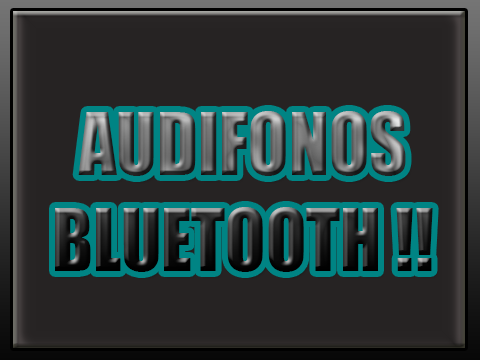
<style>
.page{position:relative;width:480px;height:360px;background:#262323}
.page>*{position:absolute;margin:0}
.t1{font:79.6px "Impact";scale:0.93 1}
</style>
<div class="page">
<p class="t1" style="left:55px;top:111px;width:378px;height:161px;text-align:center">AUDIFONOS<br>BLUETOOTH !!</p>
</div>
